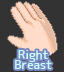
<style>
.page{position:relative;width:64px;height:72px;background:#333333}
.page>*{position:absolute;margin:0}
.t1{font:12px/10px "JK-Gothic-M";color:#c9ffff}
</style>
<div class="page">
<p class="t1" style="left:15px;top:50px;width:37px;height:20px;text-align:center">Right<br>Breast</p>
</div>
